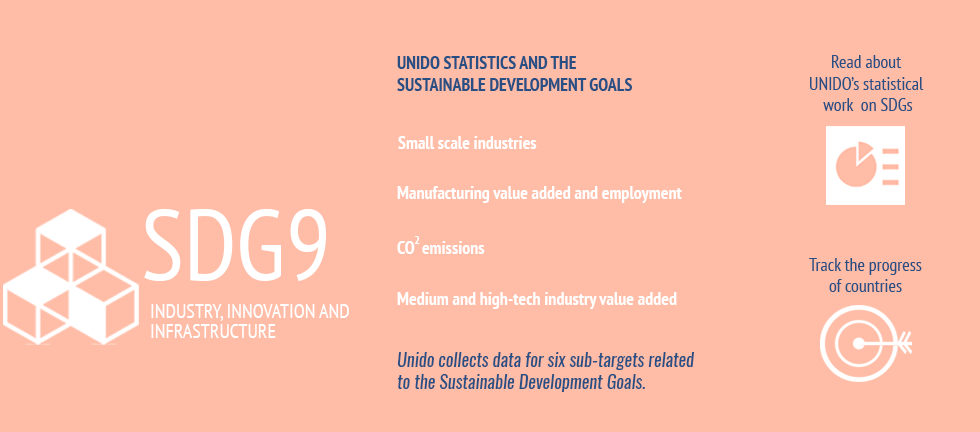
<style>
.page{position:relative;width:980px;height:432px;background:#ffbda7}
.page>*{position:absolute;margin:0}
.t1{font:18px "PTSans-NarrowBold";color:#284f83}
.t2{font:18px "PTSans-Narrow";color:#284f83}
.t3{font:18px "PTSans-NarrowBold";color:#ffffff}
.t4{font:100px "PTSans-Narrow";color:#ffffff}
.t5{font:12px "PTSans-NarrowBold";color:#ffffff}
.t6{font:20px "PTSans-Narrow";color:#ffffff}
.t7{font:18px "Oswald-RegularItalic";color:#284f83}
</style>
<div class="page">
<p class="t1" style="left:397px;top:56px;width:236px;height:35px">UNIDO STATISTICS AND THE<br>SUSTAINABLE DEVELOPMENT GOALS</p>
<p class="t2" style="left:810px;top:55px;width:114px;height:56px;text-align:center">Read about <br>UNIDO’s statistical <br>work  on SDGs</p>
<p class="t3" style="left:398px;top:136px;width:139px;height:13px">Small scale industries</p>
<p class="t3" style="left:397px;top:186px;width:285px;height:17px">Manufacturing value added and employment</p>
<p class="t4" style="left:144px;top:209px;width:182px;height:72px">SDG9</p>
<p class="t3" style="left:397px;top:241px;width:88px;height:13px">CO  emissions</p>
<p class="t5" style="left:415px;top:236px;width:5px;height:8px">2</p>
<p class="t2" style="left:809px;top:258px;width:113px;height:34px;text-align:center">Track the progress<br>of countries</p>
<p class="t3" style="left:397px;top:292px;width:280px;height:17px">Medium and high-tech industry value added</p>
<p class="t6" style="left:151px;top:304px;width:198px;height:17px">INDUSTRY, INNOVATION AND</p>
<p class="t6" style="left:151px;top:324px;width:125px;height:14px">INFRASTRUCTURE</p>
<p class="t7" style="left:397px;top:352px;width:298px;height:40px">Unido collects data for six sub-targets related<br>to the Sustainable Development Goals.</p>
</div>
